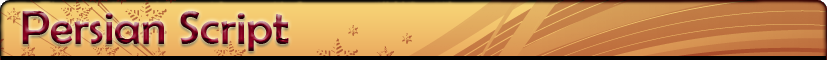
<style>
.page{position:relative;width:827px;height:60px}
.page>*{position:absolute;margin:0}
.t1{font:48px "BerlinSansFB-Reg"}
</style>
<div class="page">
<p class="t1" style="left:22px;top:11px;width:267px;height:40px">Persian Script</p>
</div>
